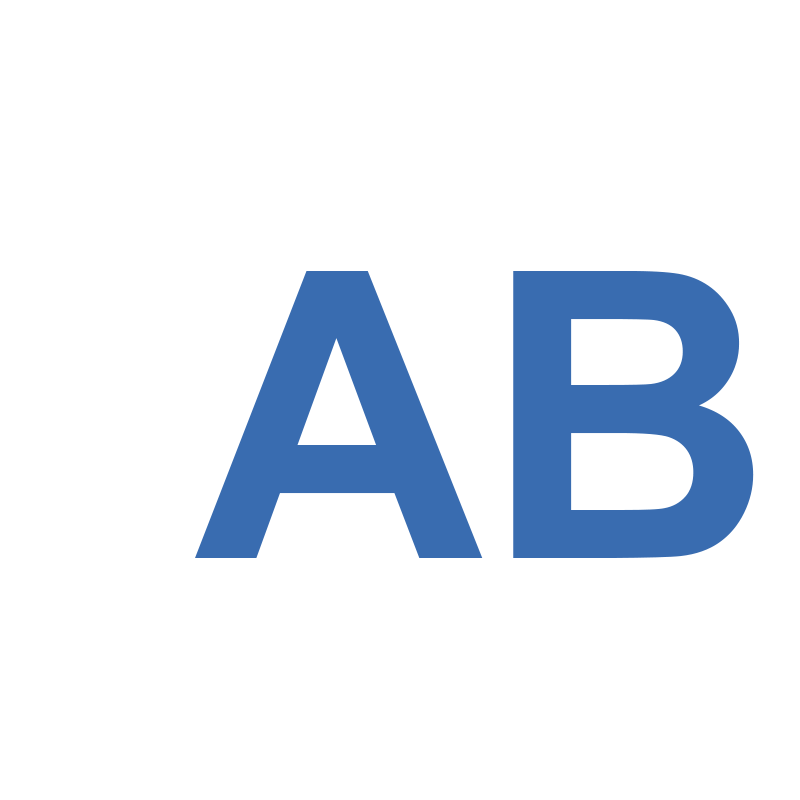
<style>
.page{position:relative;width:800px;height:800px;background:#ffffff}
.page>*{position:absolute;margin:0}
.t1{font:400px "Arial-BoldMT";color:#396cb0}
.t2{font:400px "Arial-BoldMT";color:#ffffff}
</style>
<div class="page">
<p class="t1" style="left:111px;top:271px;width:643px;height:287px"><span class="t2">I</span>AB</p>
</div>
